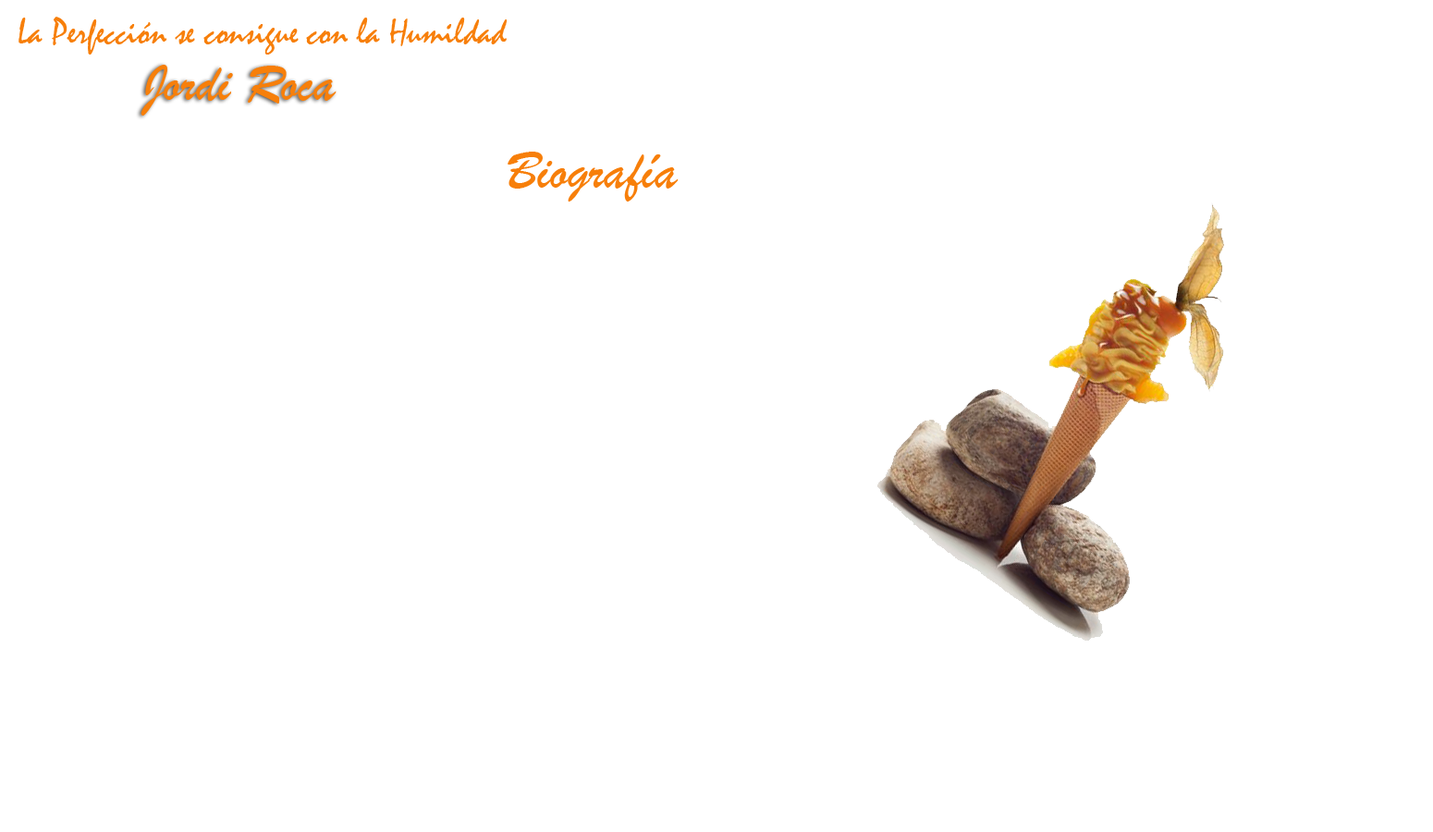
<style>
.page{position:relative;width:1433px;height:832px;background:#ffffff}
.page>*{position:absolute;margin:0}
.t1{font:37px "Mistral";color:#f77f0a;scale:0.97 1}
.t2{font:55.5px "BrushScriptMT";color:#f77f0a;scale:0.97 1}
.t3{font:55.5px "BrushScriptMT";color:#f77f0a}
</style>
<div class="page">
<p class="t1" style="left:18px;top:17px;width:490px;height:38px">La Perfección se consigue con la Humildad</p>
<p class="t2" style="left:141px;top:65px;width:196px;height:51px">Jordi Roca</p>
<p class="t3" style="left:508px;top:152px;width:171px;height:50px">Biografía</p>
</div>
